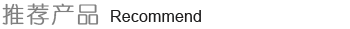
<style>
.page{position:relative;width:350px;height:29px;background:#ffffff}
.page>*{position:absolute;margin:0}
.t1{font:22px "FZY1JW--GB1-0";letter-spacing:0.1em;color:#7f7f7f;font-weight:bold}
.t2{font:16px "ArialMT";letter-spacing:0.01em;color:#201f1f}
</style>
<div class="page">
<p class="t1" style="left:2px;top:3px;width:97px;height:22px">推荐产品</p>
<p class="t2" style="left:111px;top:10px;width:90px;height:12px">Recommend</p>
</div>
